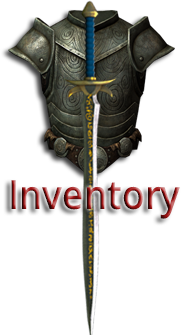
<style>
.page{position:relative;width:185px;height:335px;background:#ffffff}
.page>*{position:absolute;margin:0}
.t1{font:40.3px "OpenSans-Semibold";scale:0.92 1}
</style>
<div class="page">
<p class="t1" style="left:11px;top:180px;width:169px;height:39px">Inventory</p>
</div>
